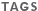
<style>
.page{position:relative;width:38px;height:11px;background:#ffffff}
.page>*{position:absolute;margin:0}
.t1{font:12px "SpartanLTStd-HeavyClass";letter-spacing:0.06em;color:#5e5d5d;text-transform:uppercase}
</style>
<div class="page">
<p class="t1" style="left:1px;top:2px;width:36px;height:9px">tags</p>
</div>
